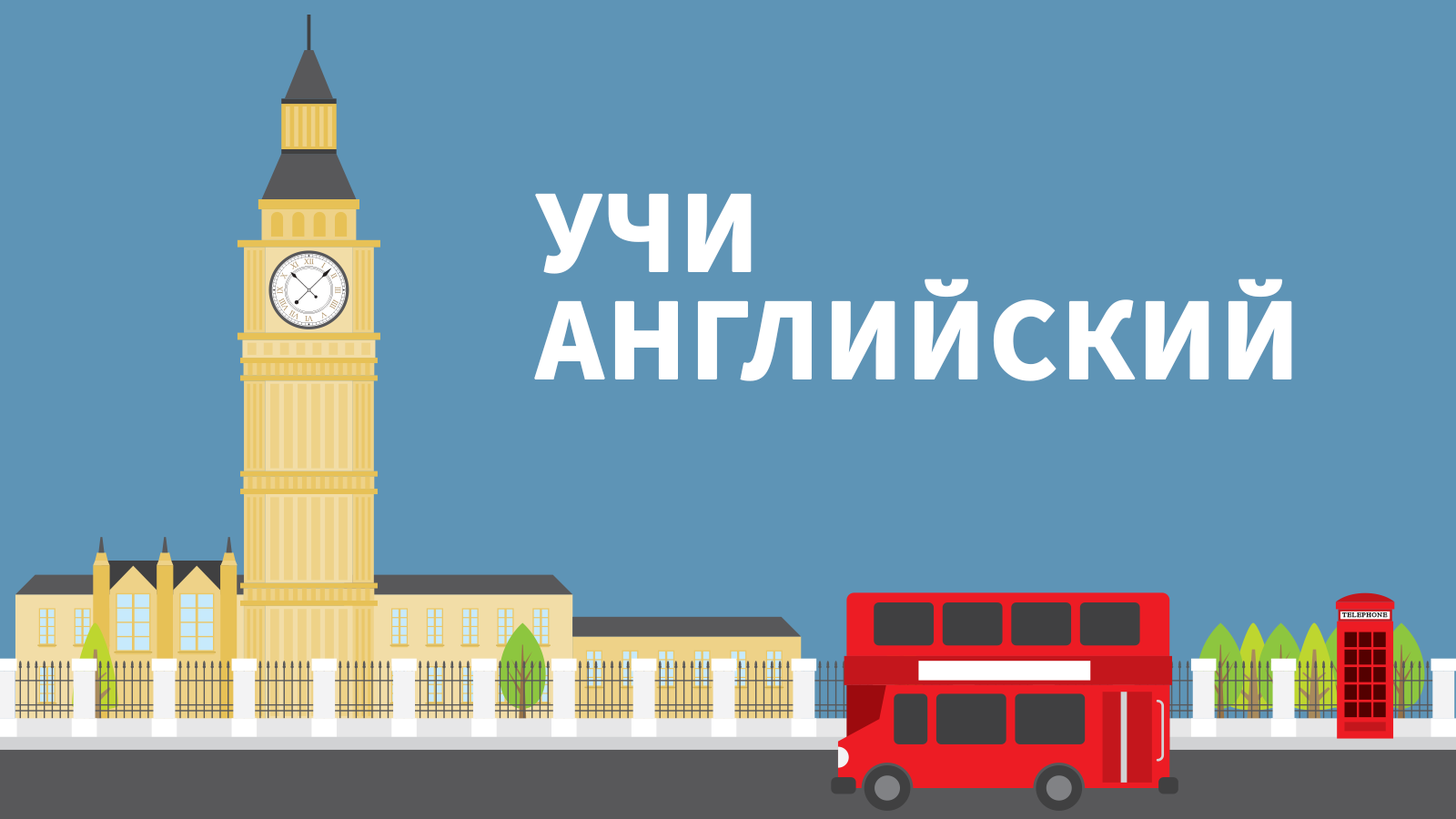
<style>
.page{position:relative;width:1456px;height:819px;background:#5e94b6}
.page>*{position:absolute;margin:0}
.t1{font:117.8px/91px "SourceSansPro-Bold";color:#ffffff;text-transform:uppercase;font-weight:bold}
</style>
<div class="page">
<p class="t1" style="left:534px;top:193px;width:758px;height:188px">Учи<br>Английский</p>
</div>
